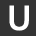
<style>
.page{position:relative;width:36px;height:36px;background:#333333}
.page>*{position:absolute;margin:0}
.t1{font:35.5px "Ubuntu-Medium";color:#ffffff}
</style>
<div class="page">
<p class="t1" style="left:9px;top:5px;width:20px;height:26px">U</p>
</div>
